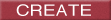
<style>
.page{position:relative;width:111px;height:20px}
.page>*{position:absolute;margin:0}
.t1{font:15.7px "Helvetica";color:#ffffff;scale:1.2 1}
</style>
<div class="page">
<p class="t1" style="left:16px;top:4px;width:75px;height:12px">CREATE</p>
</div>
